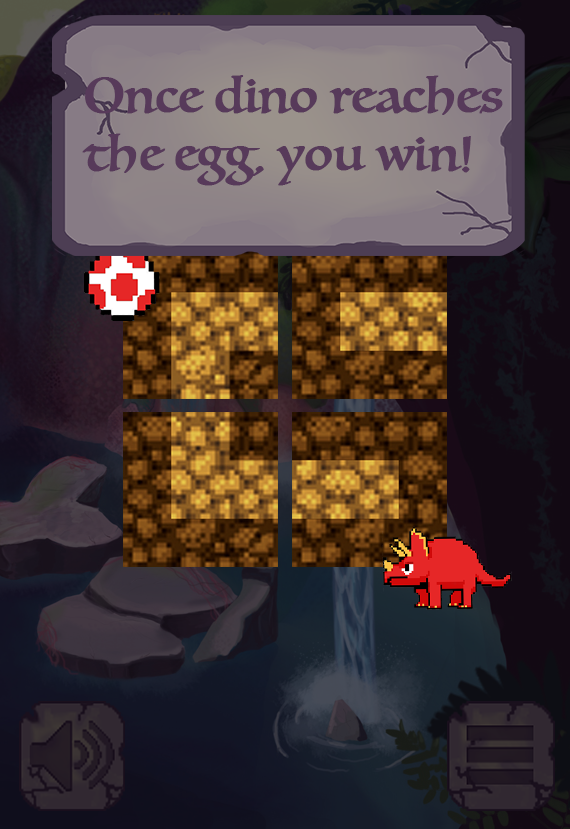
<style>
.page{position:relative;width:570px;height:829px}
.page>*{position:absolute;margin:0}
.t1{font:48px "Luminari-Regular";color:#573a5a;font-weight:bold}
</style>
<div class="page">
<p class="t1" style="left:82px;top:75px;width:421px;height:111px">Once dino reaches <br>the egg, you win!</p>
</div>
